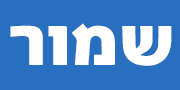
<style>
.page{position:relative;width:180px;height:90px;background:#286fbf}
.page>*{position:absolute;margin:0}
.t1{font:81px "FbAlbatros-Black";color:#ffffff}
</style>
<div class="page">
<p class="t1" style="left:10px;top:23px;width:162px;height:43px">שמור</p>
</div>
